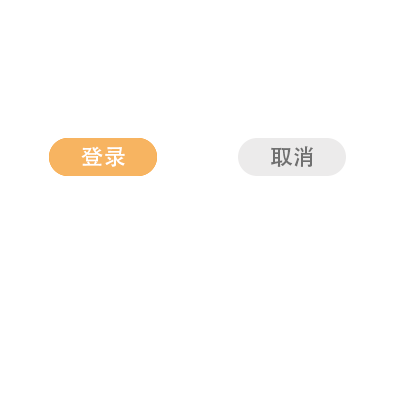
<style>
.page{position:relative;width:400px;height:400px;background:#ffffff}
.page>*{position:absolute;margin:0}
.t1{font:22.4px "AdobeHeitiStd-Regular";color:#ffffff}
.t2{font:22.4px "AdobeHeitiStd-Regular";color:#707070}
</style>
<div class="page">
<p class="t1" style="left:81px;top:146px;width:44px;height:21px">登录</p>
<p class="t1" style="left:81px;top:146px;width:44px;height:21px">登录</p>
<p class="t2" style="left:271px;top:146px;width:42px;height:21px">取消</p>
<p class="t2" style="left:271px;top:146px;width:42px;height:21px">取消</p>
</div>
